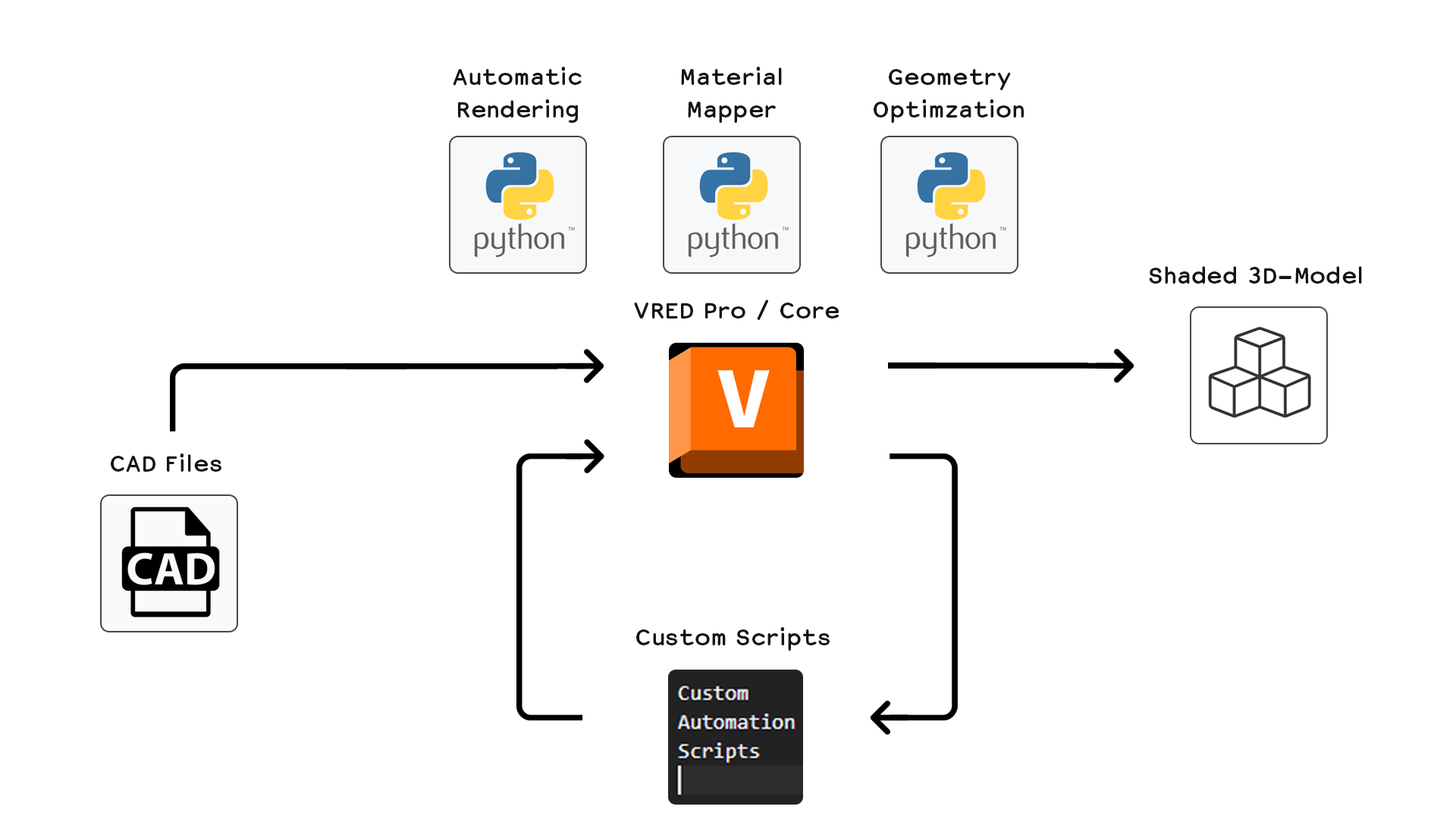
<style>
.page{position:relative;width:1456px;height:819px;background:#ffffff}
.page>*{position:absolute;margin:0}
.t1{font:26.8px "CourierSans-Bold";color:#141414}
</style>
<div class="page">
<p class="t1" style="left:453px;top:67px;width:129px;height:56px;text-align:center">Automatic<br>Rendering</p>
<p class="t1" style="left:681px;top:67px;width:101px;height:56px;text-align:center">Material<br>Mapper</p>
<p class="t1" style="left:874px;top:69px;width:150px;height:54px;text-align:center">Geometry<br>Optimzation</p>
<p class="t1" style="left:1149px;top:266px;width:213px;height:18px">Shaded 3D-Model</p>
<p class="t1" style="left:634px;top:300px;width:205px;height:20px">VRED Pro / Core</p>
<p class="t1" style="left:111px;top:453px;width:110px;height:19px">CAD Files</p>
<p class="t1" style="left:636px;top:627px;width:194px;height:24px">Custom Scripts</p>
</div>
